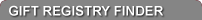
<style>
.page{position:relative;width:202px;height:20px;background:#858585}
.page>*{position:absolute;margin:0}
.t1{font:13.3px "Arial-BoldMT";color:#ffffff}
</style>
<div class="page">
<p class="t1" style="left:9px;top:5px;width:155px;height:11px">GIFT REGISTRY FINDER</p>
</div>
